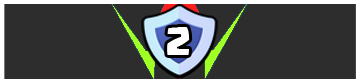
<style>
.page{position:relative;width:360px;height:83px;background:#2d2d2d}
.page>*{position:absolute;margin:0}
.t1{font:30px "Supercell-Magic";color:#ffffff}
</style>
<div class="page">
<p class="t1" style="left:167px;top:27px;width:23px;height:28px">2</p>
</div>
